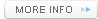
<style>
.page{position:relative;width:98px;height:19px}
.page>*{position:absolute;margin:0}
.t1{font:10px "ArialMT";color:#6c6c6c}
</style>
<div class="page">
<p class="t1" style="left:16px;top:6px;width:56px;height:7px">MORE INFO</p>
</div>
